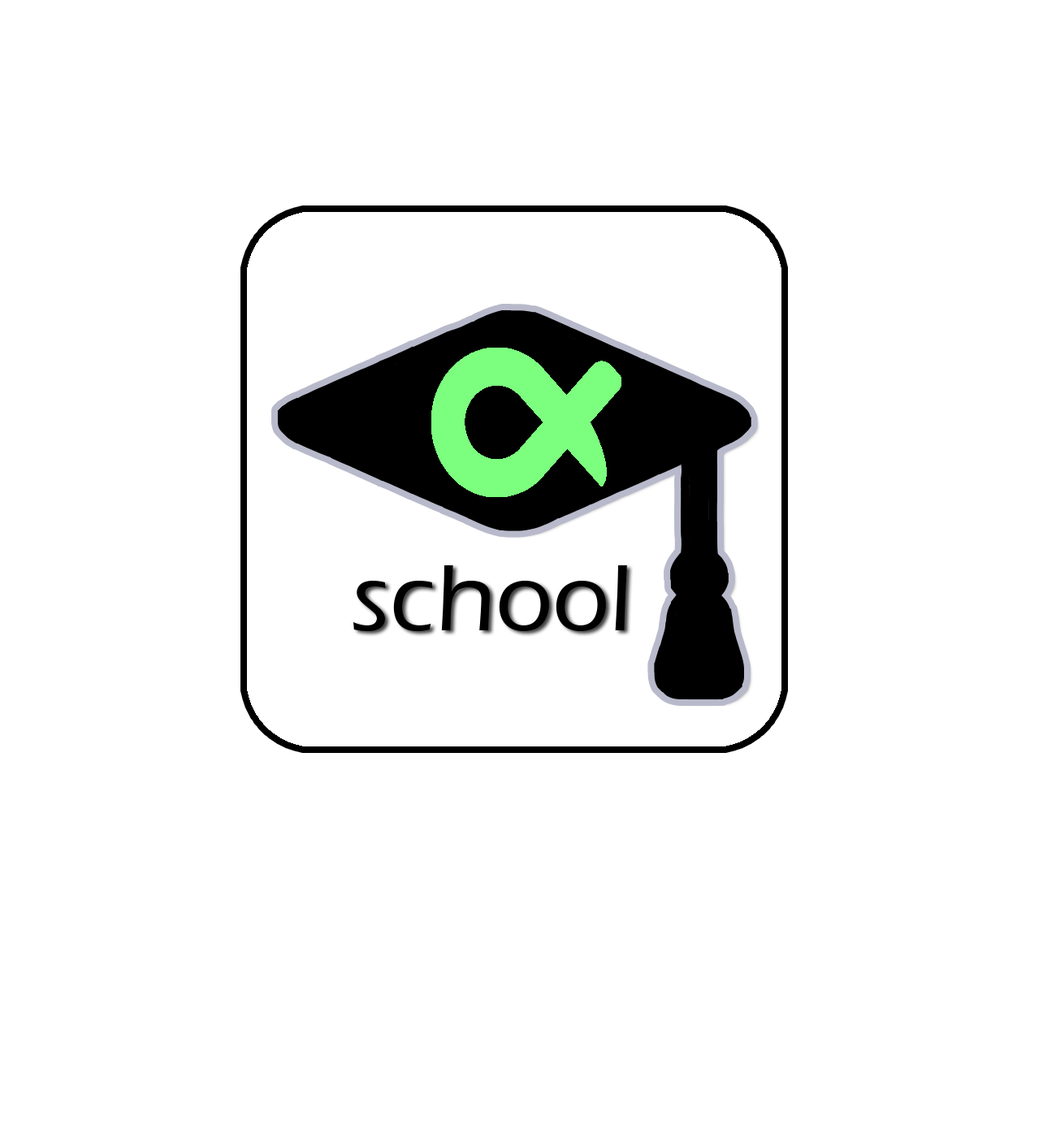
<style>
.page{position:relative;width:1056px;height:1129px;background:#ffffff}
.page>*{position:absolute;margin:0}
.t1{font:97.5px "ErasITC-Medium";color:#000000}
</style>
<div class="page">
<p class="t1" style="left:353px;top:565px;width:274px;height:66px">school</p>
</div>
